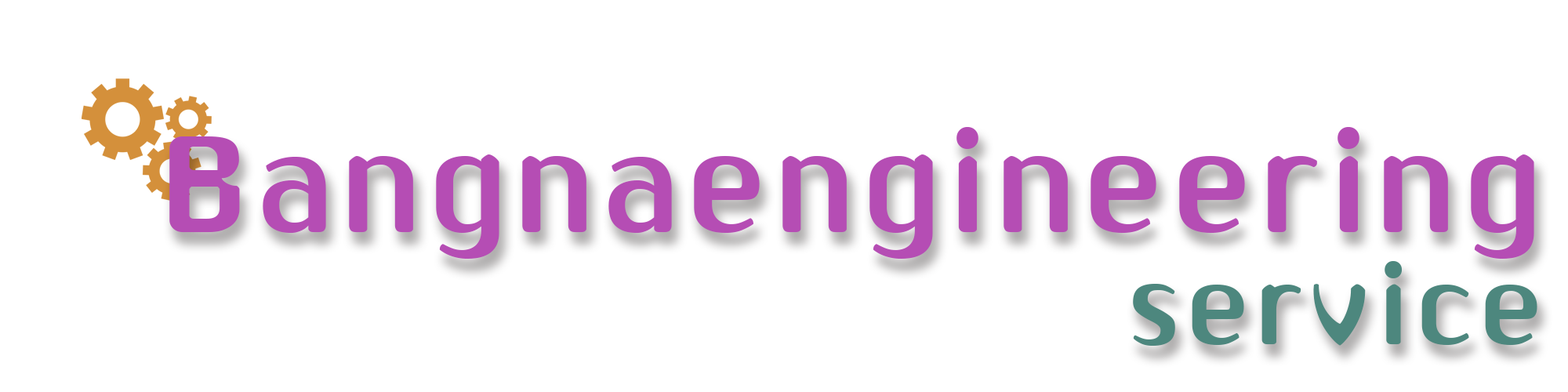
<style>
.page{position:relative;width:1568px;height:392px;background:#ffffff}
.page>*{position:absolute;margin:0}
.t1{font:149px "EDPoonpunn-Regular";letter-spacing:0.05em;color:#b54db4}
.t2{font:117.6px "EDPoonpunn-Regular";letter-spacing:0.05em;color:#4d877e}
</style>
<div class="page">
<p class="t1" style="left:169px;top:127px;width:1365px;height:132px">Bangnaengineering</p>
<p class="t2" style="left:1133px;top:261px;width:404px;height:85px">service</p>
</div>
